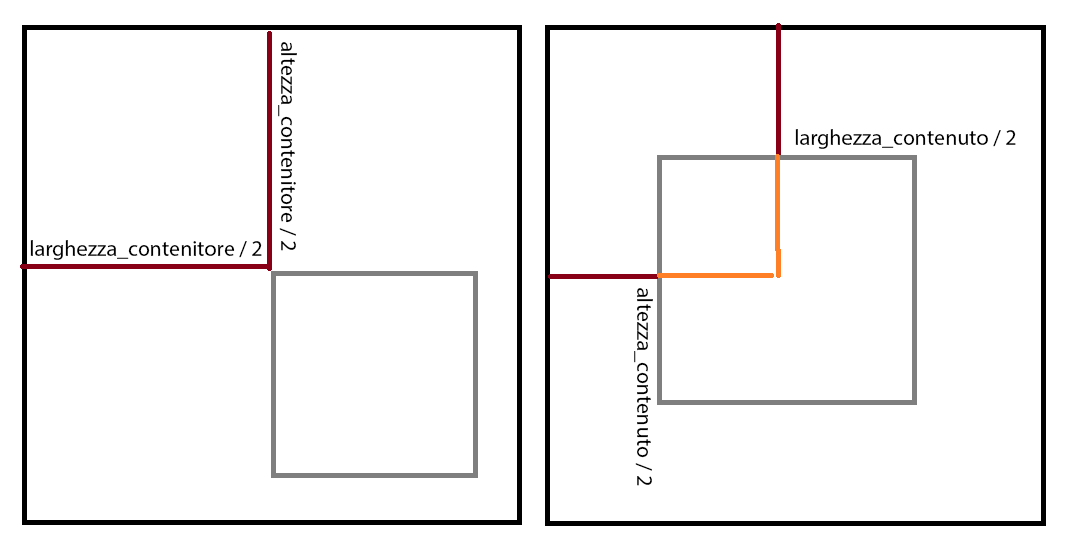
<style>
.page{position:relative;width:1076px;height:548px;background:#ffffff}
.page>*{position:absolute;margin:0}
.t1{font:22px "MyriadPro-Regular";color:#000000}
</style>
<div class="page">
<p class="t1" style="left:278px;top:42px;width:19px;height:209px;rotate:90deg">altezza_contenitore / 2</p>
<p class="t1" style="left:795px;top:129px;width:221px;height:20px">larghezza_contenuto / 2</p>
<p class="t1" style="left:30px;top:240px;width:232px;height:20px">larghezza_contenitore / 2</p>
<p class="t1" style="left:634px;top:288px;width:19px;height:198px;rotate:90deg">altezza_contenuto / 2</p>
</div>
